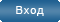
<style>
.page{position:relative;width:60px;height:22px}
.page>*{position:absolute;margin:0}
.t1{font:11px "ArialMT";letter-spacing:0.099em;color:#ffffff}
</style>
<div class="page">
<p class="t1" style="left:16px;top:6px;width:28px;height:10px">Вход</p>
</div>
